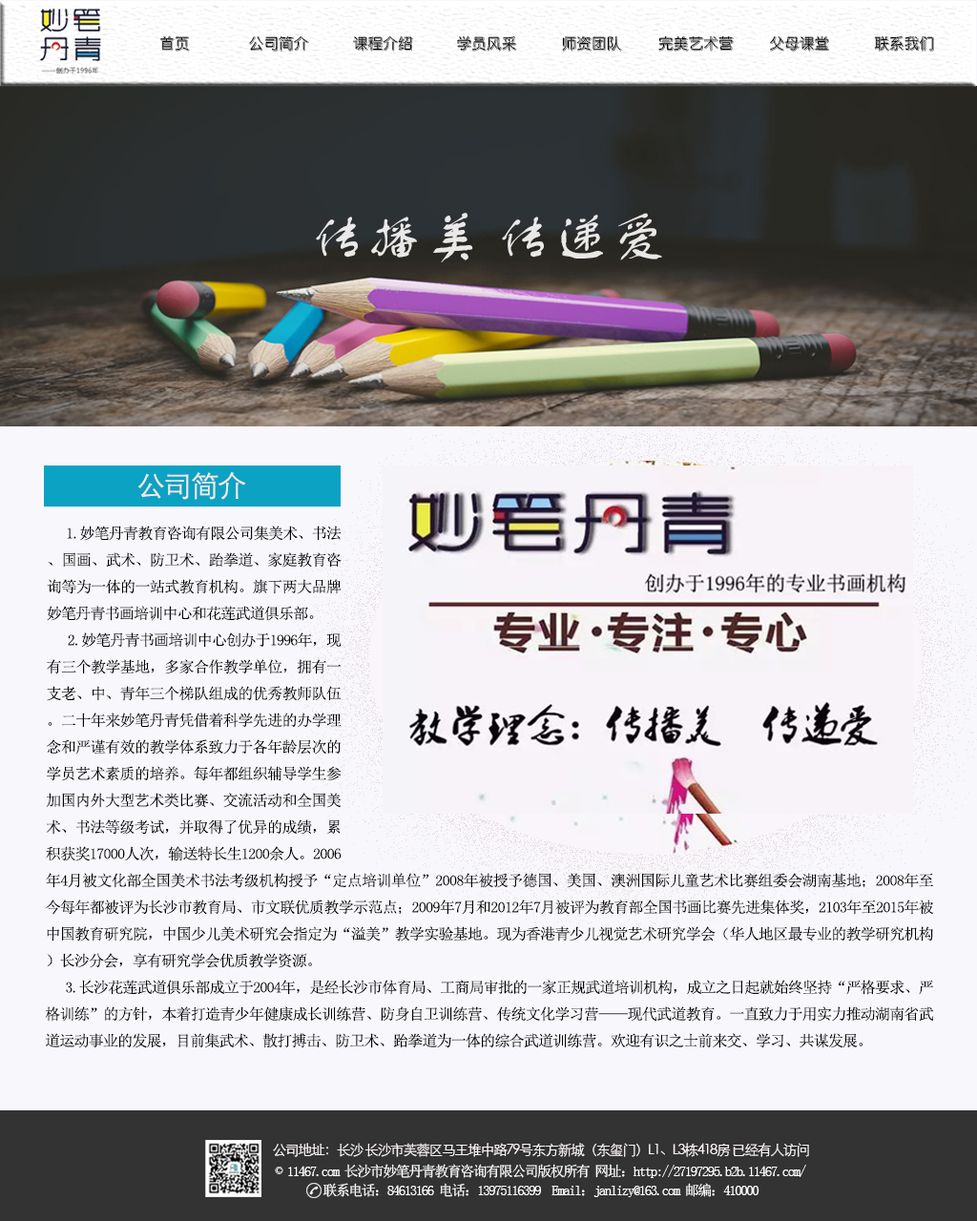
<style>
.page{position:relative;width:977px;height:1221px;background:#f8f7fb}
.page>*{position:absolute;margin:0}
.t1{font:16.7px "YuanliEG-Bold-GB";letter-spacing:-0.1em;color:#010101}
.t2{font:57.2px "FZSTK--GBK1-0";color:#fefbfb}
.t3{font:28.6px "STXihei";letter-spacing:-0.05em;color:#f0e9e9}
.t4{font:15.3px "SimSun";letter-spacing:-0.05em;color:#040404}
.t5{font:14.3px "SimSun";letter-spacing:-0.05em;color:#040404}
.t6{font:14.3px "STXihei";letter-spacing:-0.1em;color:#fbf4f4}
.t7{font:14.3px "SimSun";letter-spacing:-0.1em;color:#ffffff}
</style>
<div class="page">
<p class="t1" style="left:159px;top:35px;width:31px;height:17px">首页</p>
<p class="t1" style="left:249px;top:36px;width:60px;height:16px">公司简介</p>
<p class="t1" style="left:353px;top:36px;width:60px;height:16px">课程介绍</p>
<p class="t1" style="left:457px;top:35px;width:60px;height:17px">学员风采</p>
<p class="t1" style="left:562px;top:35px;width:60px;height:17px">师资团队</p>
<p class="t1" style="left:658px;top:35px;width:75px;height:17px">完美艺术营</p>
<p class="t1" style="left:770px;top:36px;width:59px;height:16px">父母课堂</p>
<p class="t1" style="left:874px;top:36px;width:60px;height:16px">联系我们</p>
<p class="t2" style="left:316px;top:213px;width:346px;height:49px;opacity:0.87">传播美 传递爱</p>
<p class="t3" style="left:137px;top:472px;width:109px;height:28px">公司简介</p>
<p class="t4" style="left:45px;top:526px;width:889px;height:522px;text-align:justify"><span class="t5">  </span>1.妙笔丹青教育咨询有限公司集美术、书法、国画、武术、防卫术、跆拳道、家庭教育咨询等为一体的一站式教育机构。旗下两大品牌妙笔丹青书画培训中心和花莲武道俱乐部。<br>   2.妙笔丹青书画培训中心创办于1996年，现有三个教学基地，多家合作教学单位，拥有一支老、中、青年三个梯队组成的优秀教师队伍。二十年来妙笔丹青凭借着科学先进的办学理念和严谨有效的教学体系致力于各年龄层次的学员艺术素质的培养。每年都组织辅导学生参加国内外大型艺术类比赛、交流活动和全国美术、书法等级考试，并取得了优异的成绩，累积获奖17000人次，输送特长生1200余人。2006年4月被文化部全国美术书法考级机构授予“定点培训单位”2008年被授予德国、美国、澳洲国际儿童艺术比赛组委会湖南基地；2008年至今每年都被评为长沙市教育局、市文联优质教学示范点；2009年7月和2012年7月被评为教育部全国书画比赛先进集体奖，2103年至2015年被中国教育研究院，中国少儿美术研究会指定为“溢美”教学实验基地。现为香港青少儿视觉艺术研究学会（华人地区最专业的教学研究机构）长沙分会，享有研究学会优质教学资源。<br>  3.长沙花莲武道俱乐部成立于2004年，是经长沙市体育局、工商局审批的一家正规武道培训机构，成立之日起就始终坚持“严格要求、严格训练”的方针，本着打造青少年健康成长训练营、防身自卫训练营、传统文化学习营——现代武道教育。一直致力于用实力推动湖南省武道运动事业的发展，目前集武术、散打搏击、防卫术、跆拳道为一体的综合武道训练营。欢迎有识之士前来交、学习、共谋发展。</p>
<p class="t6" style="left:273px;top:1143px;width:536px;height:14px">公司地址：长沙 长沙市芙蓉区马王堆中路79号东方新城（东玺门）L1、L3栋418房 已经有人访问</p>
<p class="t7" style="left:275px;top:1164px;width:531px;height:14px">© 11467.com 长沙市妙笔丹青教育咨询有限公司版权所有 网址：http://27197295.b2b.11467.com/</p>
<p class="t7" style="left:323px;top:1183px;width:436px;height:14px">联系电话：84613166 电话：13975116399  Email：janlizy@163.com 邮编：410000</p>
</div>
